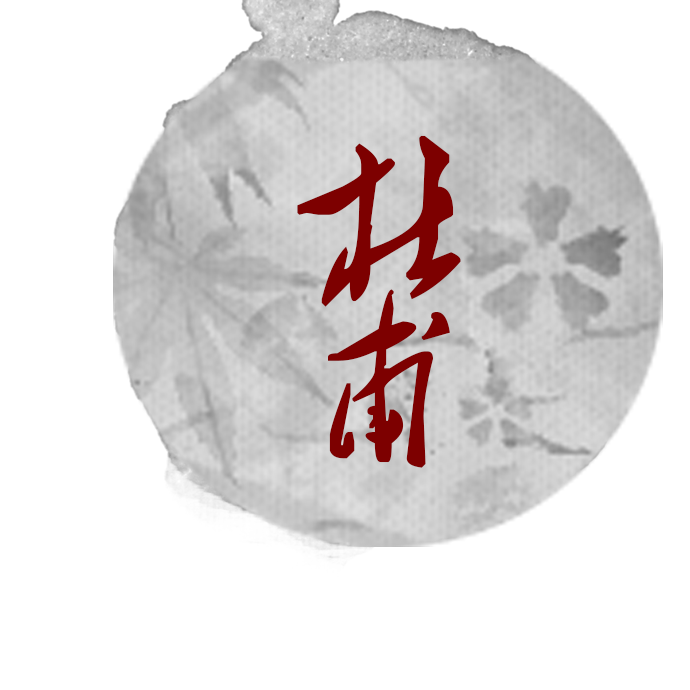
<style>
.page{position:relative;width:690px;height:690px;background:#ffffff}
.page>*{position:absolute;margin:0}
.t1{font:159.8px/10px "²ÝÌ´Õ«Ã«Ôó¶«×ÖÌå";letter-spacing:0.012em;color:#7d0000}
</style>
<div class="page">
<p class="t1" style="left:297px;top:135px;width:164px;height:333px">杜甫</p>
</div>
